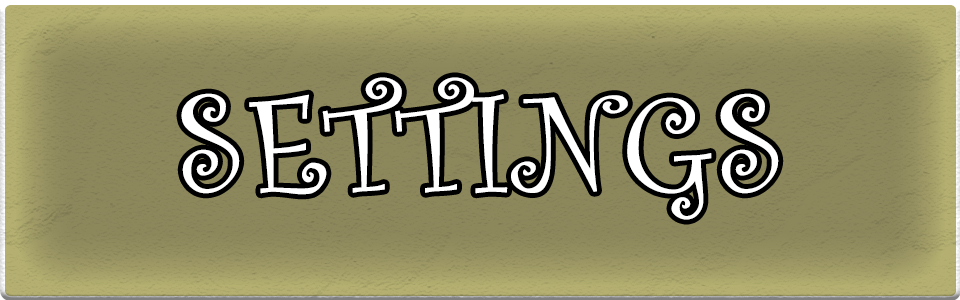
<style>
.page{position:relative;width:960px;height:300px}
.page>*{position:absolute;margin:0}
.t1{font:144px "CurlzMT";color:#ffffff;font-weight:bold}
</style>
<div class="page">
<p class="t1" style="left:181px;top:77px;width:598px;height:143px">SETTINGS</p>
</div>
